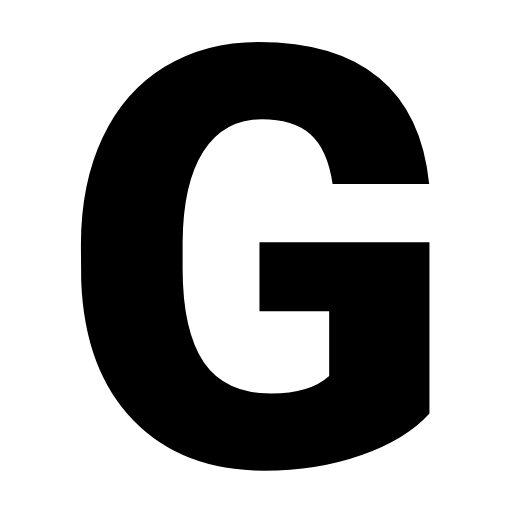
<style>
.page{position:relative;width:512px;height:512px;background:#ffffff}
.page>*{position:absolute;margin:0}
.t1{font:586.7px "Roboto-Black";letter-spacing:0.321em;color:#000000}
</style>
<div class="page">
<p class="t1" style="left:80px;top:42px;width:350px;height:429px">G</p>
</div>
